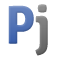
<style>
.page{position:relative;width:57px;height:57px;background:#ffffff}
.page>*{position:absolute;margin:0}
.t1{font:54.4px "Signika-Bold";scale:0.94 1}
</style>
<div class="page">
<p class="t1" style="left:8px;top:4px;width:40px;height:52px">Pj</p>
</div>
